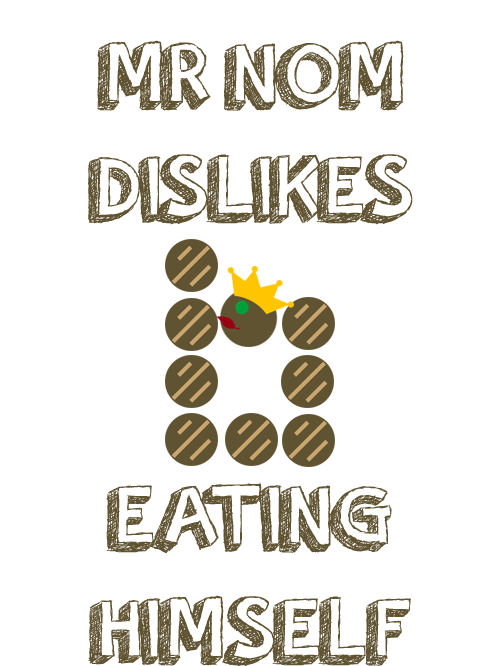
<style>
.page{position:relative;width:500px;height:666px;background:#ffffff}
.page>*{position:absolute;margin:0}
.t1{font:94px "orangejuice";color:#605332}
</style>
<div class="page">
<p class="t1" style="left:88px;top:40px;width:325px;height:185px;text-align:center">MR NOM<br>DISLIKES</p>
<p class="t1" style="left:88px;top:482px;width:323px;height:185px;text-align:center">EATING<br>HIMSELF</p>
</div>
